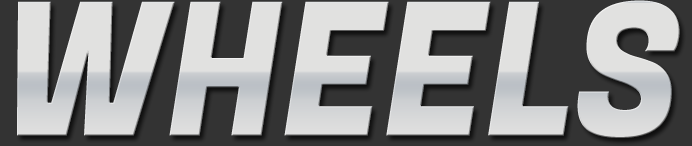
<style>
.page{position:relative;width:692px;height:146px;background:#333333}
.page>*{position:absolute;margin:0}
.t1{font:185.2px "FugazOne-Regular";color:#dfdfdf;scale:0.89 1}
</style>
<div class="page">
<p class="t1" style="left:17px;top:0px;width:663px;height:138px">WHEELS</p>
</div>
